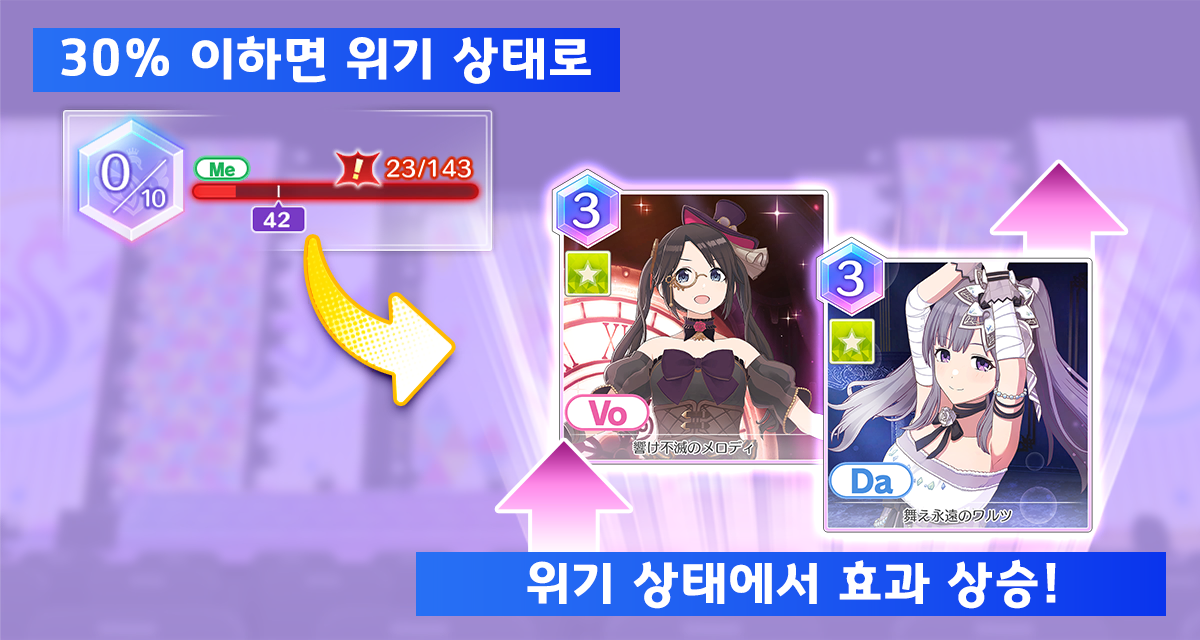
<style>
.page{position:relative;width:1200px;height:640px}
.page>*{position:absolute;margin:0}
.t1{font:50.7px "GyeonggiTitleB";letter-spacing:0.05em;color:#ffffff}
</style>
<div class="page">
<p class="t1" style="left:61px;top:35px;width:530px;height:49px">30% 이하면 위기 상태로</p>
<p class="t1" style="left:527px;top:559px;width:529px;height:50px">위기 상태에서 효과 상승!</p>
</div>
